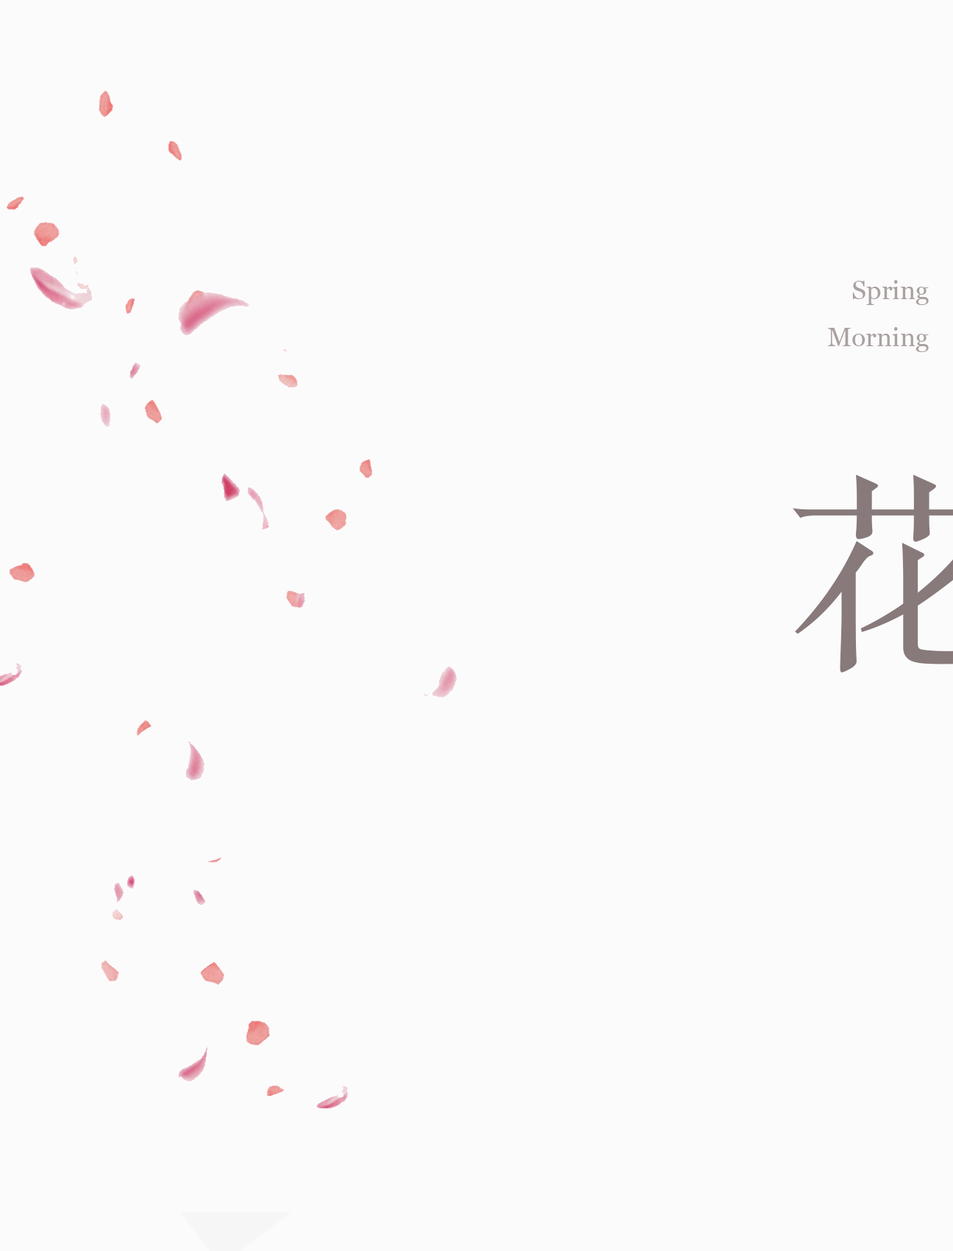
<style>
.page{position:relative;width:953px;height:1251px;background:#fcfbfb}
.page>*{position:absolute;margin:0}
.t1{font:26.5px/47.1px "Georgia";color:#aba1a1}
</style>
<div class="page">
<p class="t1" style="left:827px;top:280px;width:102px;height:72px;text-align:right">Spring <br>Morning</p>
</div>
